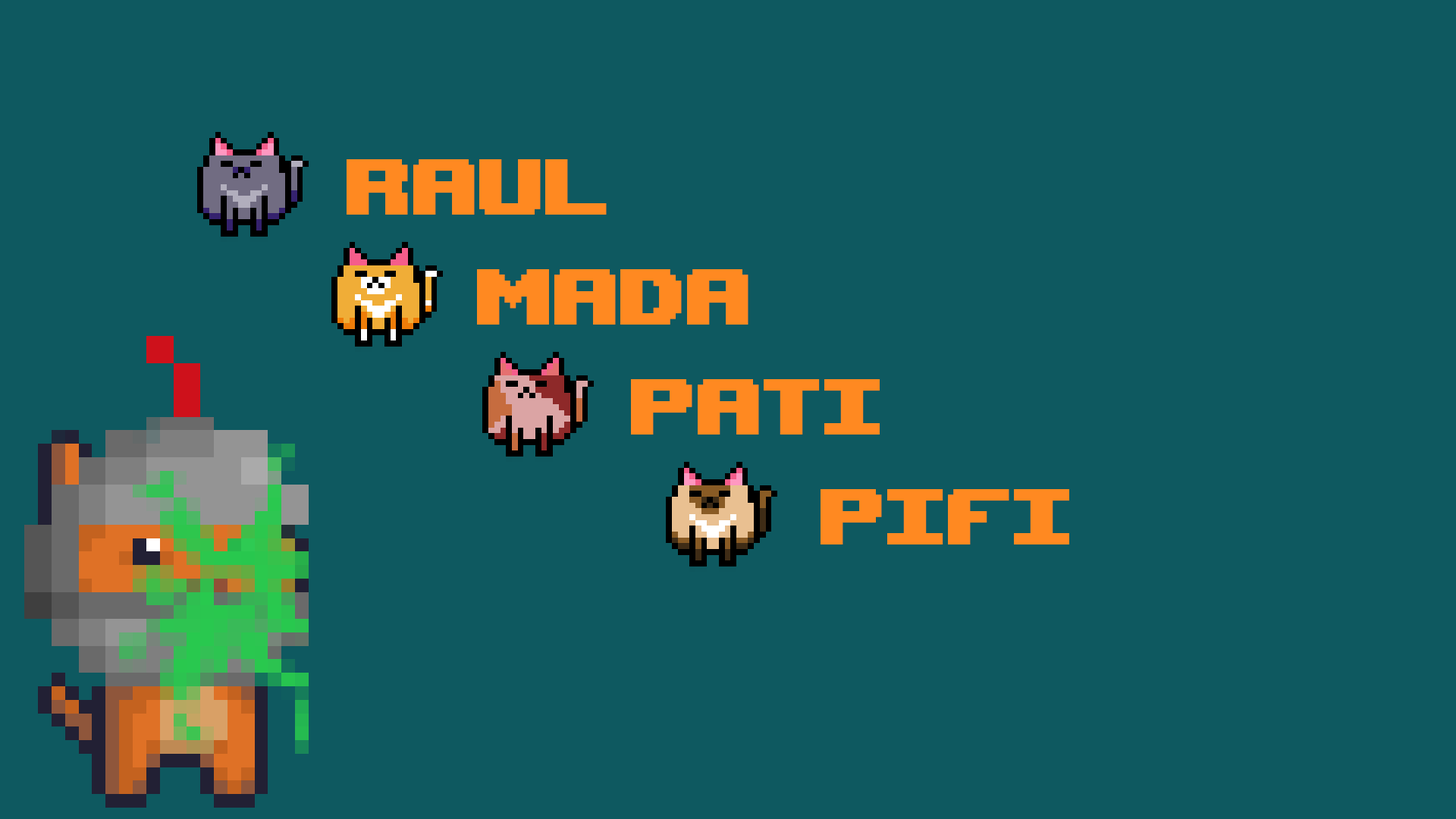
<style>
.page{position:relative;width:1456px;height:819px;background:#0e5960}
.page>*{position:absolute;margin:0}
.t1{font:110.6px "UpheavalTT-BRK-";color:#ff8921}
</style>
<div class="page">
<p class="t1" style="left:347px;top:159px;width:260px;height:56px">Raul</p>
<p class="t1" style="left:477px;top:269px;width:271px;height:56px">mada</p>
<p class="t1" style="left:631px;top:379px;width:249px;height:56px">pati</p>
<p class="t1" style="left:821px;top:489px;width:248px;height:55px">pifi</p>
</div>
